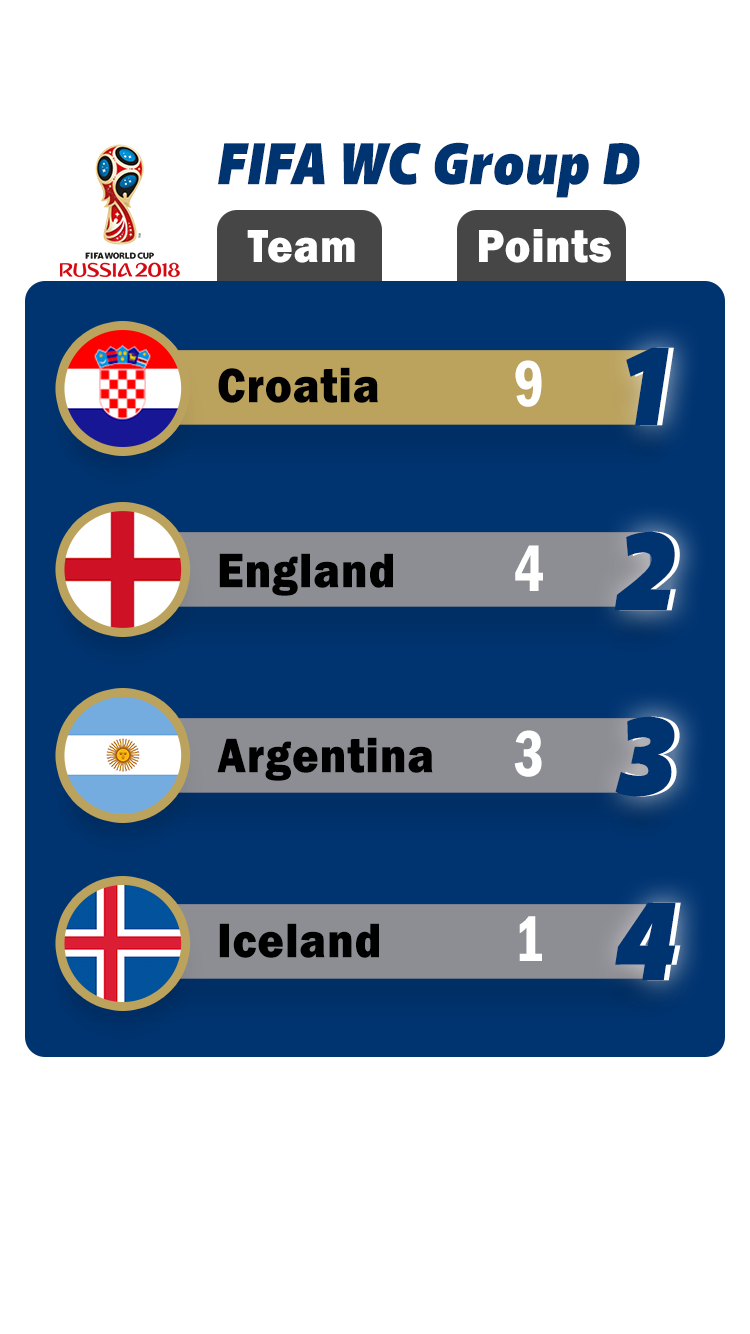
<style>
.page{position:relative;width:750px;height:1334px;background:#ffffff}
.page>*{position:absolute;margin:0}
.t1{font:60px "AkagiPro-FatItalic";letter-spacing:0.025em;color:#003471;scale:0.9 1}
.t2{font:48px "FranklinGothic-Heavy";letter-spacing:0.025em;color:#ffffff;scale:0.9 1}
.t3{font:67px/185px "FranklinGothic-DemiCond";letter-spacing:0.025em;color:#ffffff;scale:0.9 1}
.t4{font:50.3px/185px "FranklinGothic-Heavy";letter-spacing:0.025em;color:#000000;scale:0.9 1}
</style>
<div class="page">
<p class="t1" style="left:218px;top:142px;width:422px;height:56px">FIFA WC Group D</p>
<p class="t2" style="left:247px;top:229px;width:364px;height:34px">Team          Points</p>
<p class="t3" style="left:514px;top:360px;width:29px;height:601px;text-align:center">9<br>4<br>3<br>1</p>
<p class="t4" style="left:217px;top:367px;width:216px;height:591px">Croatia<br>England<br>Argentina<br>Iceland</p>
</div>
